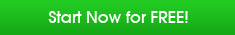
<style>
.page{position:relative;width:235px;height:35px}
.page>*{position:absolute;margin:0}
.t1{font:16px "AvantGardeLT-Medium";color:#ffffff}
</style>
<div class="page">
<p class="t1" style="left:48px;top:11px;width:140px;height:12px">Start Now for FREE!</p>
</div>
